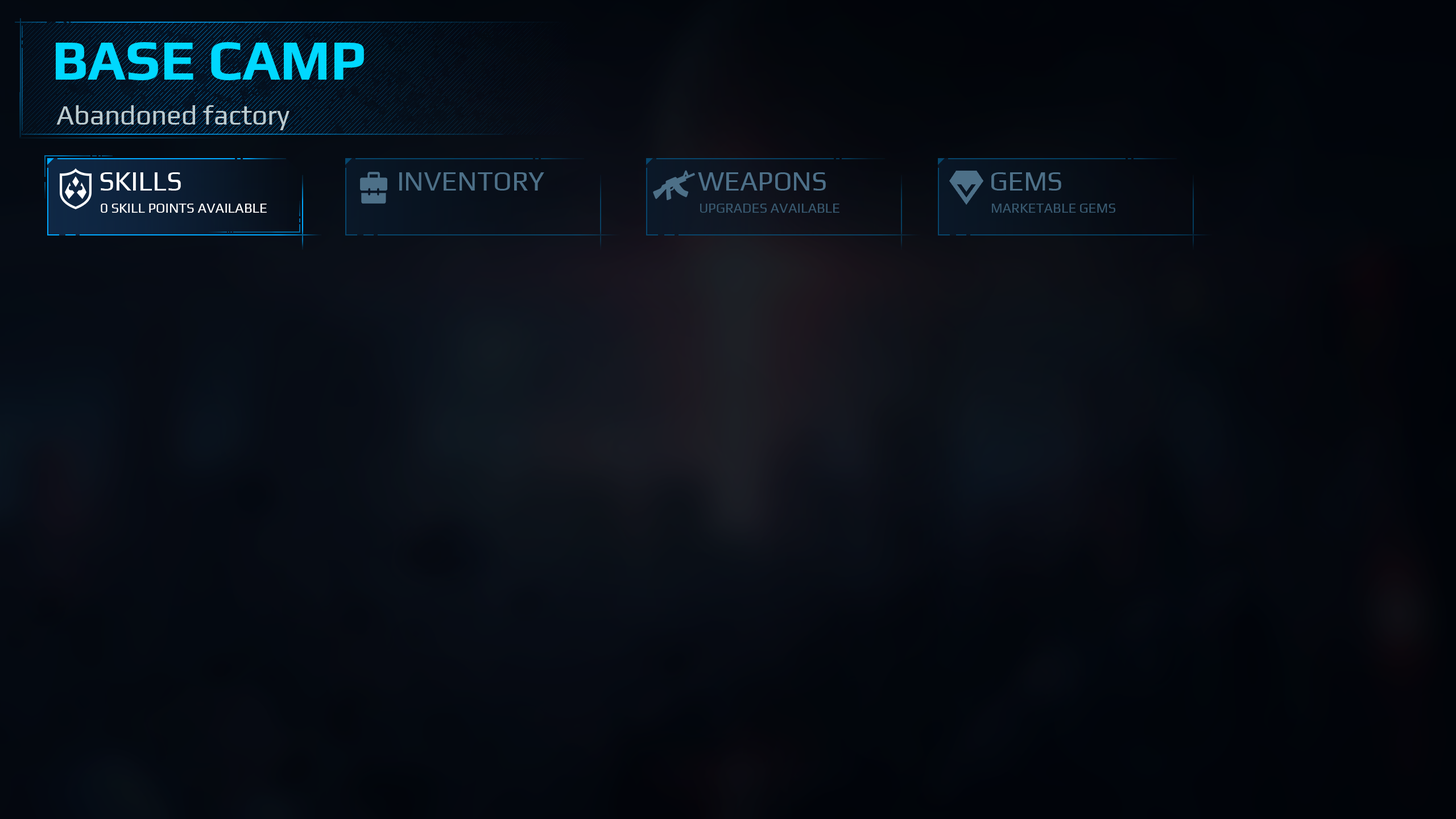
<style>
.page{position:relative;width:1456px;height:819px}
.page>*{position:absolute;margin:0}
.t1{font:56.9px "Play-Bold";color:#00d8ff}
.t2{font:27.3px "Play-Regular";color:#bbcbcf}
.t3{font:27.3px "Play-Regular";color:#ffffff}
.t4{font:27.3px "Play-Regular";color:#4d7088}
.t5{font:27.3px "Play-Regular";color:#4d7089}
.t6{font:13.6px "Play-Regular";color:#ffffff}
.t7{font:13.6px "Play-Regular";color:#395a71}
</style>
<div class="page">
<p class="t1" style="left:56px;top:42px;width:308px;height:38px">BASE CAMP</p>
<p class="t2" style="left:56px;top:105px;width:233px;height:25px">Abandoned factory</p>
<p class="t3" style="left:100px;top:172px;width:81px;height:19px">SKILLS</p>
<p class="t4" style="left:399px;top:172px;width:145px;height:19px">INVENTORY</p>
<p class="t5" style="left:698px;top:172px;width:128px;height:19px">WEAPONS</p>
<p class="t4" style="left:991px;top:172px;width:70px;height:19px">GEMS</p>
<p class="t6" style="left:101px;top:204px;width:166px;height:9px">0 SKILL POINTS AVAILABLE</p>
<p class="t7" style="left:700px;top:204px;width:139px;height:9px">UPGRADES AVAILABLE</p>
<p class="t7" style="left:992px;top:204px;width:123px;height:9px">MARKETABLE GEMS</p>
</div>
